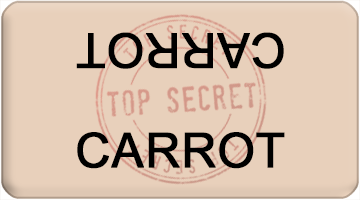
<style>
.page{position:relative;width:360px;height:200px;background:#e8d0bb}
.page>*{position:absolute;margin:0}
.t1{font:48px "ArialMT";color:#000000;font-weight:bold}
</style>
<div class="page">
<p class="t1" style="left:76px;top:32px;width:208px;height:37px;rotate:180deg">CARROT</p>
<p class="t1" style="left:77px;top:132px;width:208px;height:37px">CARROT</p>
</div>
